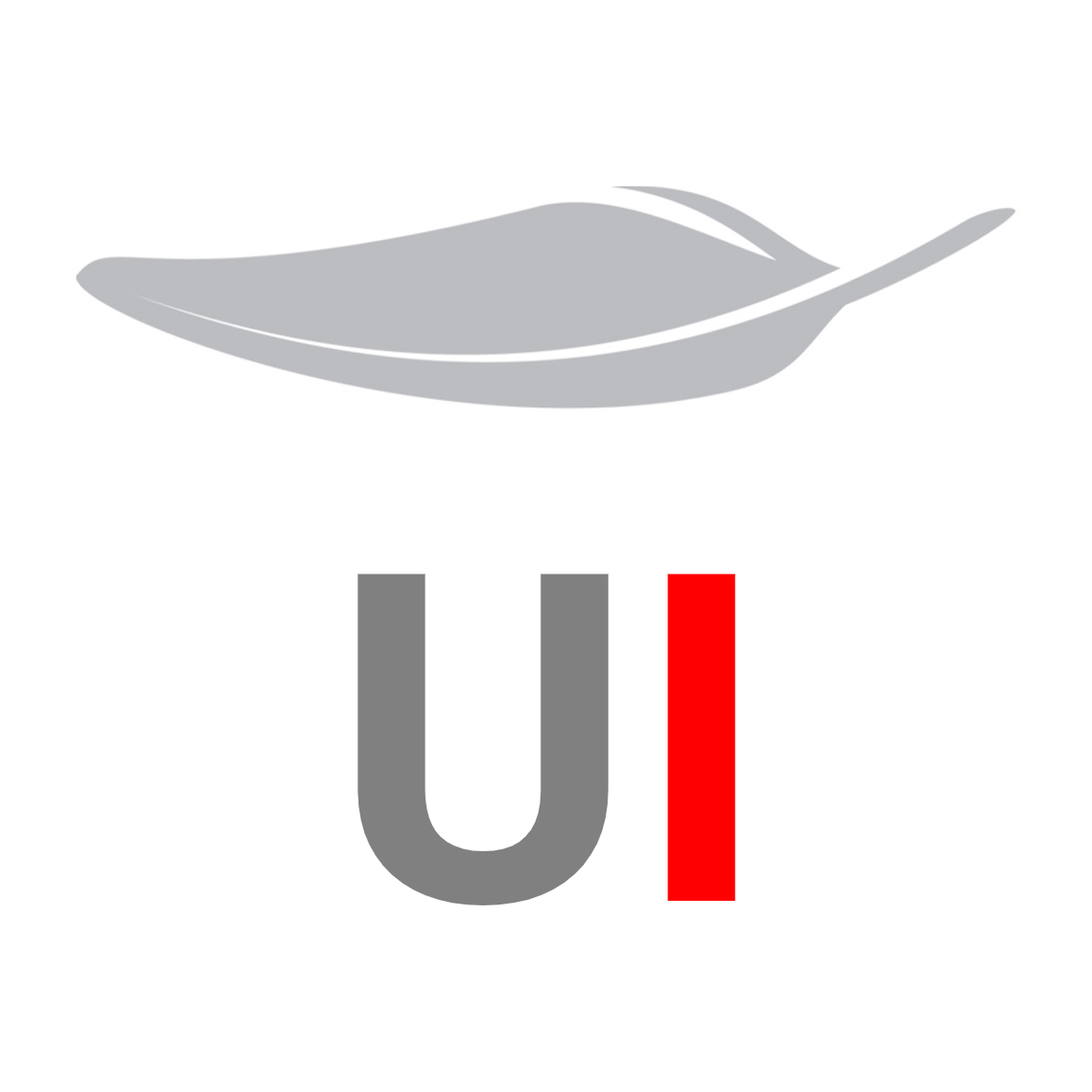
<style>
.page{position:relative;width:1092px;height:1092px;background:#ffffff}
.page>*{position:absolute;margin:0}
.t1{font:459.6px "Roboto-Bold";color:#808080}
.t2{font:459.6px "Roboto-Bold";color:#ff0000}
</style>
<div class="page">
<p class="t1" style="left:358px;top:574px;width:377px;height:331px">U<span class="t2">I</span></p>
</div>
